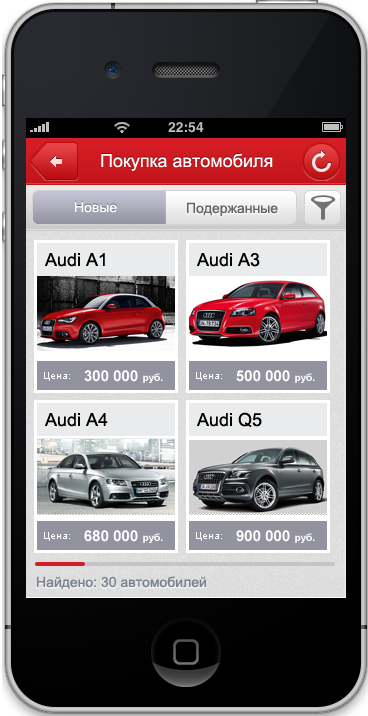
<style>
.page{position:relative;width:368px;height:716px}
.page>*{position:absolute;margin:0}
.t1{font:18px "ArialMT";color:#ffffff}
.t2{font:14px "ArialMT";color:#ffffff}
.t3{font:14px "ArialMT";color:#646464}
.t4{font:18px "ArialMT";color:#000000}
.t5{font:10px "ArialMT";color:#ffffff}
.t6{font:15px "Arial-BoldMT";color:#ffffff}
.t7{font:10px "Arial-BoldMT";color:#ffffff}
.t8{font:10px "ArialMT";color:#fefefe}
.t9{font:14px "ArialMT";color:#7d7d7d}
</style>
<div class="page">
<p class="t1" style="left:101px;top:153px;width:172px;height:18px">Покупка автомобиля</p>
<p class="t2" style="left:75px;top:201px;width:42px;height:12px">Новые</p>
<p class="t3" style="left:187px;top:202px;width:91px;height:14px">Подержанные</p>
<p class="t4" style="left:44px;top:253px;width:61px;height:14px">Audi A1</p>
<p class="t4" style="left:196px;top:253px;width:64px;height:14px">Audi A3</p>
<p class="t5" style="left:44px;top:372px;width:26px;height:9px">Цена:</p>
<p class="t6" style="left:84px;top:370px;width:79px;height:13px">300 000 <span class="t7">руб.</span></p>
<p class="t5" style="left:196px;top:372px;width:26px;height:9px">Цена:</p>
<p class="t6" style="left:236px;top:370px;width:79px;height:13px">500 000 <span class="t7">руб.</span></p>
<p class="t4" style="left:44px;top:413px;width:64px;height:14px">Audi A4</p>
<p class="t4" style="left:196px;top:412px;width:66px;height:16px">Audi Q5</p>
<p class="t5" style="left:44px;top:532px;width:26px;height:9px">Цена:</p>
<p class="t6" style="left:84px;top:530px;width:79px;height:13px">680 000 <span class="t7">руб.</span></p>
<p class="t8" style="left:196px;top:532px;width:26px;height:9px">Цена:</p>
<p class="t6" style="left:236px;top:530px;width:79px;height:13px">900 000 <span class="t7">руб.</span></p>
<p class="t9" style="left:37px;top:576px;width:169px;height:14px">Найдено: 30 автомобилей</p>
</div>
